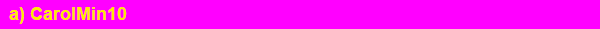
<style>
.page{position:relative;width:600px;height:29px;background:#ff00ff}
.page>*{position:absolute;margin:0}
.t1{font:18px "Arial-BoldMT";color:#ffea00}
</style>
<div class="page">
<p class="t1" style="left:9px;top:7px;width:118px;height:17px">a) CarolMin10</p>
</div>
